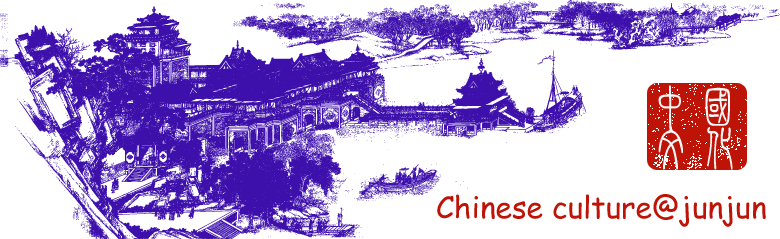
<style>
.page{position:relative;width:780px;height:239px;background:#ffffff}
.page>*{position:absolute;margin:0}
.t1{font:48px "FZXZTFW--GB1-0";color:#f8f6f6}
.t2{font:30px "ComicSansMS";color:#bd1407}
</style>
<div class="page">
<p class="t1" style="left:658px;top:85px;width:72px;height:44px">中国</p>
<p class="t2" style="left:437px;top:194px;width:329px;height:33px">Chinese culture@junjun</p>
</div>
